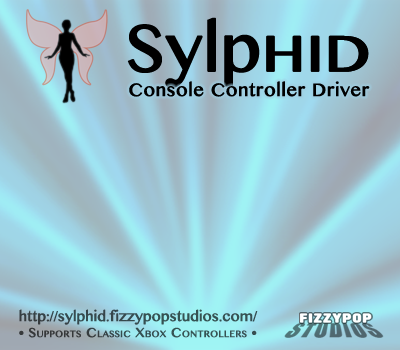
<style>
.page{position:relative;width:400px;height:350px}
.page>*{position:absolute;margin:0}
.t1{font:66px "BanglaMN";color:#000000;font-weight:bold}
.t2{font:72px "BanglaMN";color:#000000;font-variant:small-caps;font-weight:bold;scale:1.15 1}
.t3{font:18px "BanglaMN";letter-spacing:0.02em;color:#000000;font-weight:bold}
.t4{font:14px "BanglaMN";color:#364e52;font-weight:bold}
.t5{font:13px "BanglaMN";letter-spacing:0.025em;font-variant:small-caps;font-weight:bold}
</style>
<div class="page">
<p class="t1" style="left:127px;top:17px;width:242px;height:71px">Sylp<span class="t2">hid</span></p>
<p class="t2" style="left:266px;top:35px;width:102px;height:37px">hid</p>
<p class="t3" style="left:129px;top:81px;width:241px;height:16px">Console Controller Driver</p>
<p class="t4" style="left:19px;top:309px;width:239px;height:16px">http://sylphid.fizzypopstudios.com/</p>
<p class="t5" style="left:19px;top:327px;width:238px;height:11px">• Supports Classic Xbox Controllers •</p>
</div>
